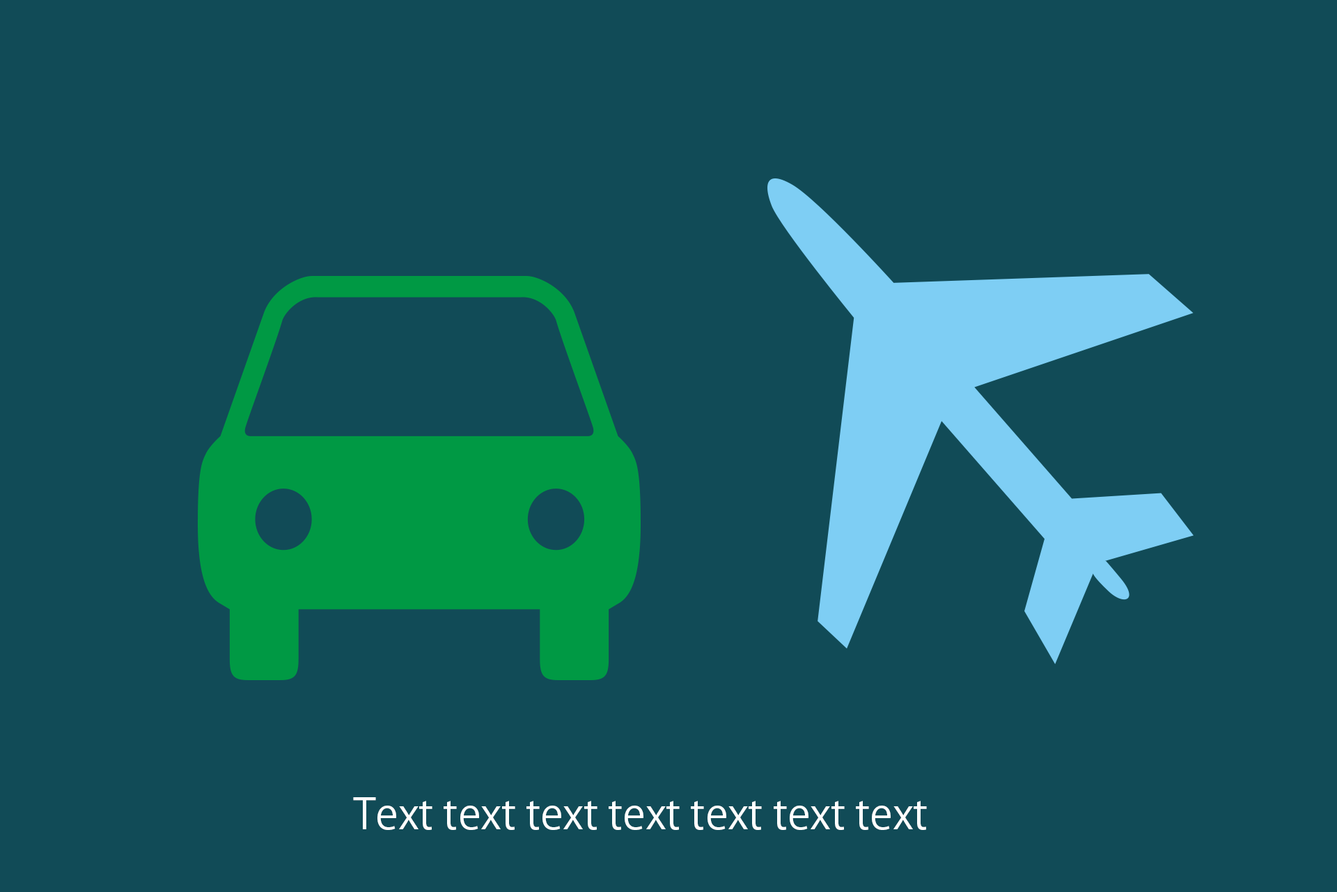
<style>
.page{position:relative;width:1337px;height:892px;background:#114b57}
.page>*{position:absolute;margin:0}
.t1{font:41.8px "KozGoPr6N-Regular";color:#ffffff}
</style>
<div class="page">
<p class="t1" style="left:353px;top:797px;width:574px;height:33px">Text text text text text text text</p>
</div>
